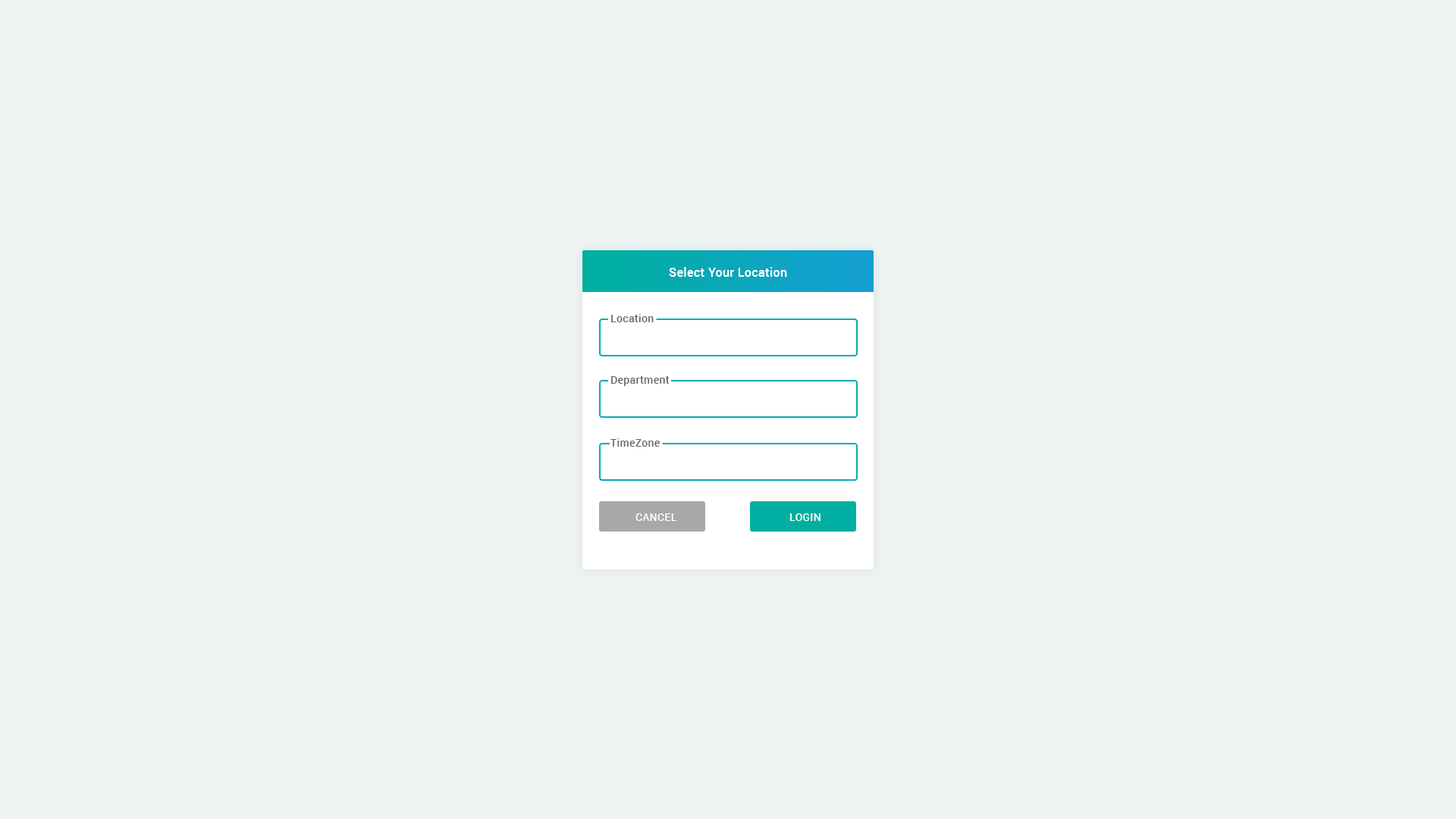
<style>
.page{position:relative;width:1456px;height:819px;background:#eef3f4}
.page>*{position:absolute;margin:0}
.t1{font:12.1px "Roboto-Medium";letter-spacing:0.025em;color:#ffffff}
.t2{font:10.6px "Roboto-Medium";letter-spacing:0.025em;color:#666666}
.t3{font:10.6px "Roboto-Medium";letter-spacing:0.025em;color:#ffffff;text-transform:uppercase}
</style>
<div class="page">
<p class="t1" style="left:669px;top:267px;width:118px;height:10px">Select Your Location</p>
<p class="t2" style="left:611px;top:314px;width:43px;height:8px">Location</p>
<p class="t2" style="left:611px;top:376px;width:59px;height:10px">Department</p>
<p class="t2" style="left:610px;top:438px;width:50px;height:9px">TimeZone</p>
<p class="t3" style="left:635px;top:513px;width:42px;height:8px">Cancel</p>
<p class="t3" style="left:790px;top:513px;width:31px;height:8px">Login</p>
</div>
